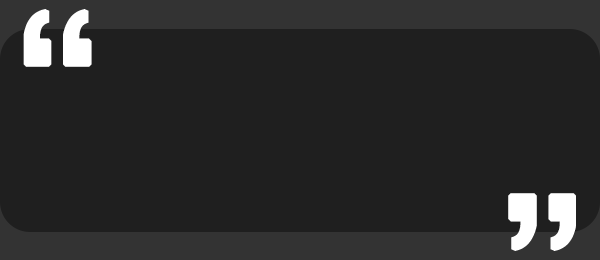
<style>
.page{position:relative;width:600px;height:260px;background:#1f1f1f}
.page>*{position:absolute;margin:0}
.t1{font:180px "SimHei";letter-spacing:0.1em;color:#ffffff;font-weight:bold}
</style>
<div class="page">
<p class="t1" style="left:23px;top:9px;width:69px;height:58px">“</p>
<p class="t1" style="left:508px;top:193px;width:68px;height:58px;rotate:180deg">“</p>
</div>
